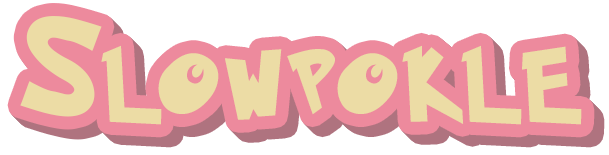
<style>
.page{position:relative;width:609px;height:155px;background:#ffffff}
.page>*{position:absolute;margin:0}
.t1{font:72px "PokemonSolidNormal";color:#ecdca5}
.t2{font:110px "PokemonSolidNormal";color:#ecdca5}
</style>
<div class="page">
<p class="t1" style="left:20px;top:16px;width:562px;height:109px"><span class="t2">S </span>L O W P O K L E</p>
<p class="t1" style="left:21px;top:17px;width:562px;height:109px"><span class="t2">S </span>L O W P O K L E</p>
<p class="t1" style="left:22px;top:18px;width:562px;height:109px"><span class="t2">S </span>L O W P O K L E</p>
</div>
